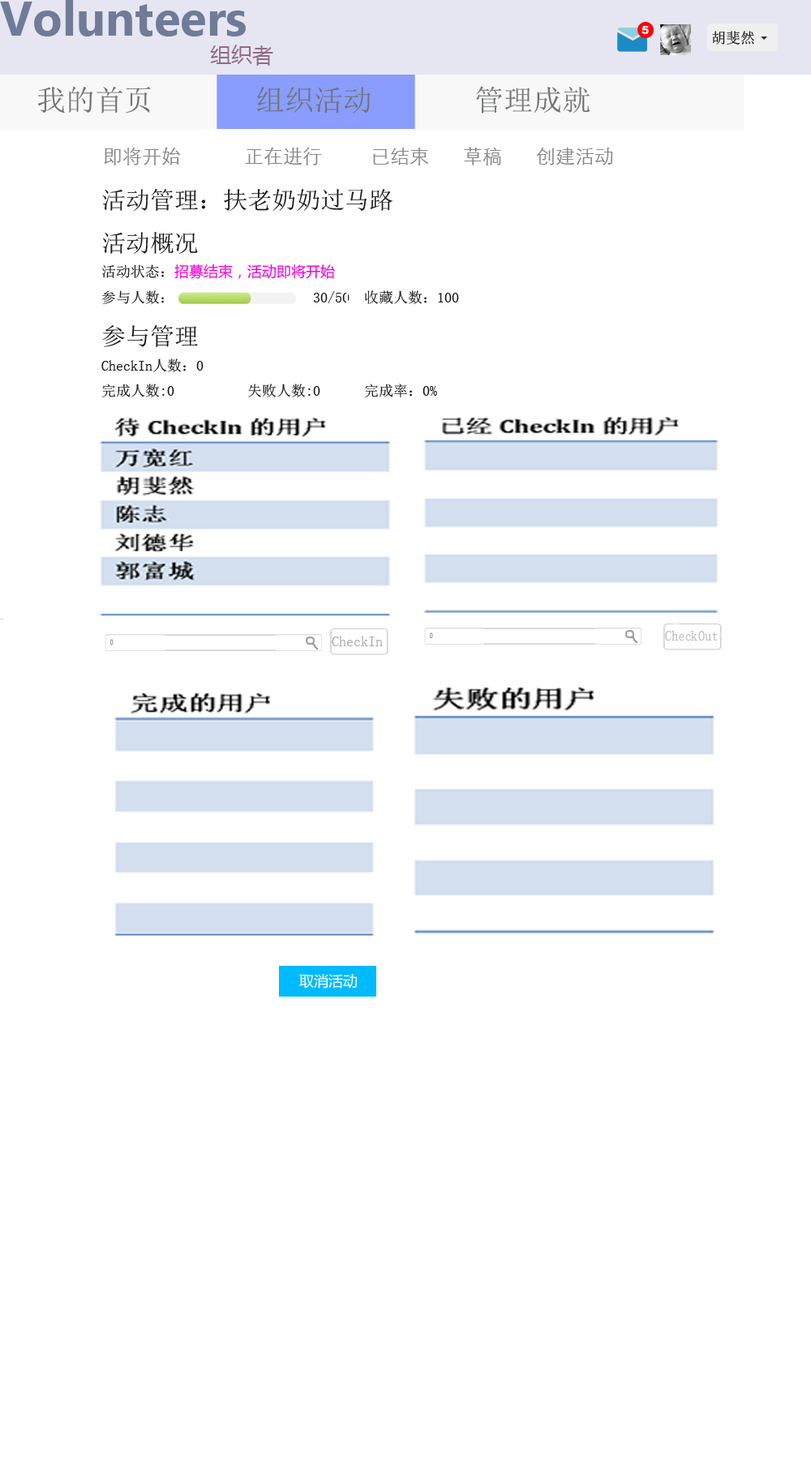
<style>
.page{position:relative;width:811px;height:1471px;background:#ffffff}
.page>*{position:absolute;margin:0}
.t1{font:11.4px "Arial-Black";color:#ffffff}
.t2{font:14.6px "SimSun";color:#141414}
.t3{font:21.1px "MicrosoftYaHei";color:#926c82}
.t4{font:29.2px "SimSun";color:#717273}
.t5{font:19.5px "STXihei";color:#878787}
.t6{font:19.5px "STXihei";color:#33aafd}
.t7{font:14.3px "SimSun";color:#171717}
.t8{font:23.8px "SimSun";color:#171717}
.t9{font:14.3px "MicrosoftYaHei";color:#f305df}
.t10{font:14.3px "SimSun";color:#bdbdbd;scale:0.93 1}
.t11{font:14.3px "SimSun";color:#acacac}
.t12{font:14.3px "MicrosoftYaHei";color:#ffffff}
</style>
<div class="page">
<p class="t1" style="left:641px;top:26px;width:8px;height:8px">5</p>
<p class="t2" style="left:712px;top:31px;width:42px;height:14px">胡斐然</p>
<p class="t3" style="left:210px;top:45px;width:63px;height:21px">组织者</p>
<p class="t4" style="left:37px;top:86px;width:553px;height:28px">我的首页       组织活动       管理成就</p>
<p class="t5" style="left:104px;top:147px;width:509px;height:18px"><span class="t6">        </span>即将开始             正在进行          已结束       草稿       创建活动</p>
<p class="t7" style="left:101px;top:188px;width:358px;height:209px"><span class="t8">活动管理：扶老奶奶过马路<br>活动概况<br></span>活动状态：<span class="t9">招募结束，活动即将开始     </span>         <br>参与人数：                   30/50  收藏人数：100<br><span class="t8">参与管理<br></span>CheckIn人数：0          <br>完成人数:0          失败人数:0      完成率：0%</p>
<p class="t10" style="left:665px;top:630px;width:53px;height:11px">CheckOut</p>
<p class="t11" style="left:332px;top:636px;width:51px;height:10px">CheckIn</p>
<p class="t12" style="left:299px;top:974px;width:59px;height:14px">取消活动</p>
</div>
